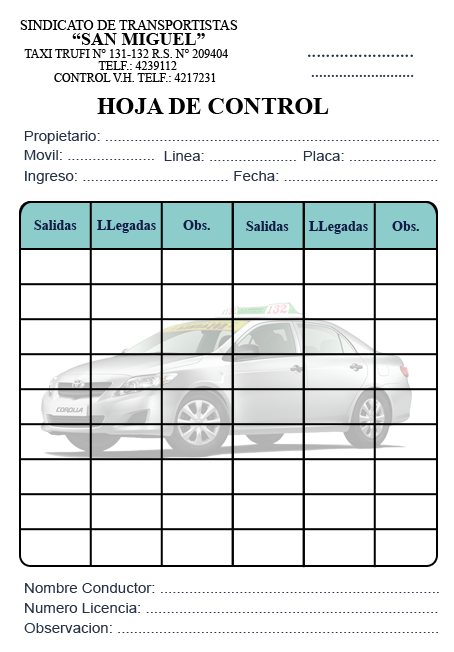
<style>
.page{position:relative;width:454px;height:652px;background:#ffffff}
.page>*{position:absolute;margin:0}
.t1{font:14px "TimesNewRomanPSMT";color:#000000}
.t2{font:18px "TimesNewRomanPS-BoldMT";color:#000000}
.t3{font:12px "TimesNewRomanPSMT";color:#000000}
.t4{font:18.9px "MinionPro-Regular";color:#263248;scale:1.08 1}
.t5{font:16.2px "MinionPro-Regular";scale:1.08 1}
.t6{font:24px "TimesNewRomanPS-BoldMT";color:#000000}
.t7{font:14px "ArialMT";color:#263248;scale:1.08 1}
.t8{font:14px "TimesNewRomanPS-BoldMT";color:#121c46}
</style>
<div class="page">
<p class="t1" style="left:20px;top:20px;width:218px;height:10px">SINDICATO DE TRANSPORTISTAS</p>
<p class="t2" style="left:72px;top:33px;width:133px;height:12px">“SAN MIGUEL”</p>
<p class="t3" style="left:24px;top:49px;width:204px;height:9px">TAXI TRUFI N° 131-132 R.S. N° 209404</p>
<p class="t4" style="left:308px;top:54px;width:105px;height:3px">.......................</p>
<p class="t3" style="left:98px;top:61px;width:79px;height:9px">TELF.: 4239112</p>
<p class="t3" style="left:54px;top:73px;width:162px;height:9px">CONTROL V.H. TELF.: 4217231</p>
<p class="t5" style="left:311px;top:74px;width:103px;height:3px">..........................</p>
<p class="t6" style="left:97px;top:98px;width:232px;height:16px">HOJA DE CONTROL</p>
<p class="t7" style="left:24px;top:130px;width:415px;height:14px">Propietario: ................................................................................</p>
<p class="t7" style="left:24px;top:150px;width:130px;height:10px">Movil: .....................</p>
<p class="t7" style="left:164px;top:151px;width:132px;height:10px">Linea: .....................</p>
<p class="t7" style="left:303px;top:151px;width:133px;height:10px">Placa: .....................</p>
<p class="t7" style="left:25px;top:171px;width:203px;height:13px">Ingreso: ...................................</p>
<p class="t7" style="left:234px;top:171px;width:204px;height:10px">Fecha: .....................................</p>
<p class="t8" style="left:34px;top:220px;width:43px;height:10px">Salidas</p>
<p class="t8" style="left:97px;top:220px;width:59px;height:13px">LLegadas</p>
<p class="t8" style="left:183px;top:220px;width:27px;height:10px">Obs.</p>
<p class="t8" style="left:246px;top:221px;width:43px;height:10px">Salidas</p>
<p class="t8" style="left:309px;top:221px;width:59px;height:13px">LLegadas</p>
<p class="t8" style="left:392px;top:221px;width:27px;height:10px">Obs.</p>
<p class="t7" style="left:25px;top:582px;width:414px;height:11px">Nombre Conductor: ...................................................................</p>
<p class="t7" style="left:25px;top:603px;width:413px;height:10px">Numero Licencia: ......................................................................</p>
<p class="t7" style="left:24px;top:623px;width:414px;height:10px">Observacion: .............................................................................</p>
</div>
